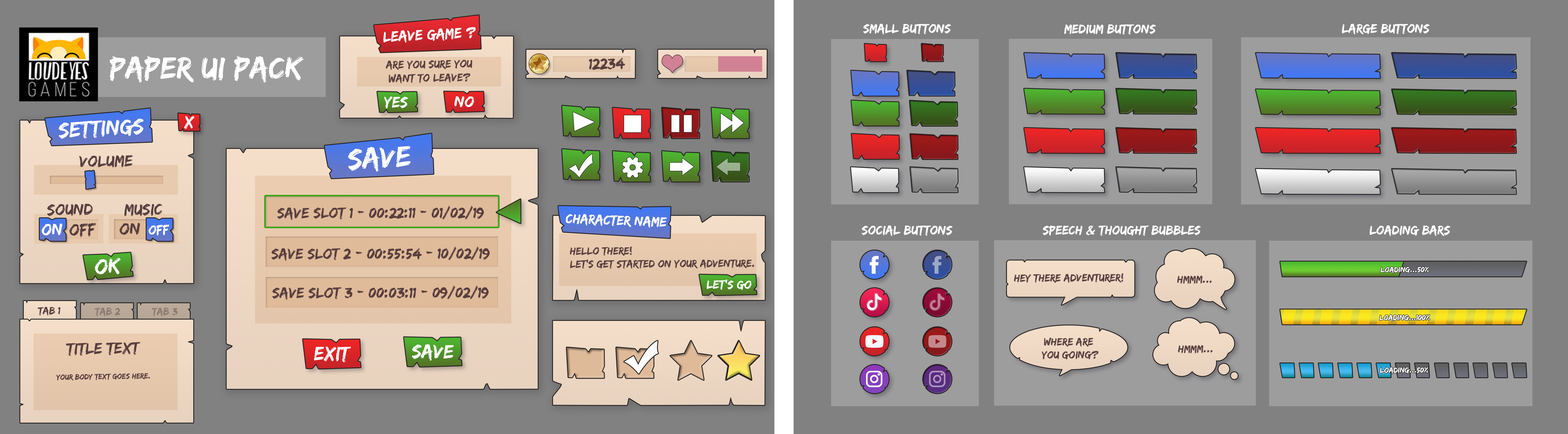
<style>
.page{position:relative;width:1568px;height:434px;background:#818181}
.page>*{position:absolute;margin:0}
.t1{font:15.2px "EdoSZ";color:#ffffff}
.t2{font:13.1px "EdoSZ";color:#ffffff}
.t3{font:32.1px "EdoSZ";color:#ffffff}
.t4{font:11.3px "EdoSZ";color:#583e3e}
.t5{font:15.7px "EdoSZ";color:#583e3e}
.t6{font:16px "EdoSZ";color:#ffffff}
.t7{font:22.4px "EdoSZ";color:#ffffff}
.t8{font:17.3px "EdoSZ";color:#ffffff}
.t9{font:30.4px "EdoSZ";color:#ffffff}
.t10{font:16.4px "EdoSZ";color:#583e3e}
.t11{font:15.4px "EdoSZ";color:#583e3e}
.t12{font:13.9px "EdoSZ";color:#ffffff}
.t13{font:17.1px "EdoSZ";color:#ffffff}
.t14{font:17.1px "EdoSZ";color:#583e3e}
.t15{font:13.5px "EdoSZ";color:#ffffff}
.t16{font:10.9px "EdoSZ";color:#583e3e}
.t17{font:7.9px "EdoSZ";color:#ffffff}
.t18{font:12.3px "EdoSZ";color:#ffffff}
.t19{font:10.5px "EdoSZ";color:#583e3e}
.t20{font:10.5px "EdoSZ";color:#8d7a70}
.t21{font:20.2px "EdoSZ";color:#ffffff}
.t22{font:7.9px "EdoSZ";color:#583e3e}
</style>
<div class="page">
<p class="t1" style="left:383px;top:27px;width:93px;height:16px;rotate:-3deg">Leave Game ?</p>
<p class="t2" style="left:863px;top:24px;width:88px;height:11px">Small Buttons</p>
<p class="t2" style="left:1064px;top:24px;width:92px;height:11px">Medium Buttons</p>
<p class="t2" style="left:1342px;top:24px;width:88px;height:11px">Large Buttons</p>
<p class="t3" style="left:110px;top:56px;width:194px;height:27px">Paper UI Pack</p>
<p class="t4" style="left:386px;top:60px;width:86px;height:24px;text-align:center;rotate:-1deg">Are You sure you<br>want to Leave?</p>
<p class="t5" style="left:589px;top:58px;width:36px;height:12px;rotate:-1deg">12234</p>
<p class="t6" style="left:384px;top:96px;width:24px;height:13px;rotate:1deg">Yes</p>
<p class="t6" style="left:454px;top:96px;width:20px;height:12px;rotate:1deg">No</p>
<p class="t7" style="left:58px;top:118px;width:86px;height:21px;rotate:-3deg">Settings</p>
<p class="t8" style="left:184px;top:116px;width:11px;height:13px;rotate:-3deg">x</p>
<p class="t9" style="left:348px;top:146px;width:63px;height:26px;rotate:-3deg">Save</p>
<p class="t10" style="left:79px;top:155px;width:54px;height:13px;rotate:-1deg">volume</p>
<p class="t10" style="left:47px;top:204px;width:46px;height:12px;rotate:-1deg">Sound</p>
<p class="t10" style="left:124px;top:204px;width:38px;height:12px;rotate:-1deg">Music</p>
<p class="t11" style="left:277px;top:206px;width:207px;height:14px">Save Slot 1 - 00:22:11 - 01/02/19</p>
<p class="t12" style="left:566px;top:214px;width:101px;height:14px;rotate:2deg">Character Name</p>
<p class="t13" style="left:41px;top:224px;width:21px;height:12px;rotate:-3deg">On</p>
<p class="t14" style="left:69px;top:223px;width:27px;height:14px;rotate:-3deg">Off</p>
<p class="t14" style="left:119px;top:223px;width:21px;height:12px;rotate:-3deg">ON</p>
<p class="t15" style="left:148px;top:225px;width:21px;height:11px;rotate:-3deg">Off</p>
<p class="t2" style="left:862px;top:225px;width:91px;height:11px">Social Buttons</p>
<p class="t2" style="left:1043px;top:225px;width:158px;height:11px">Speech &amp; Thought Bubbles</p>
<p class="t2" style="left:1369px;top:225px;width:81px;height:11px">Loading Bars</p>
<p class="t7" style="left:95px;top:258px;width:26px;height:17px;rotate:-3deg">ok</p>
<p class="t11" style="left:271px;top:246px;width:219px;height:15px">Save Slot 2 - 00:55:54 - 10/02/19</p>
<p class="t16" style="left:570px;top:246px;width:184px;height:23px">Hello There!<br>Let’s Get started on your adventure.</p>
<p class="t17" style="left:1381px;top:267px;width:48px;height:7px">Loading...50%</p>
<p class="t18" style="left:707px;top:279px;width:44px;height:11px;rotate:1deg">Let’s Go</p>
<p class="t16" style="left:1014px;top:273px;width:109px;height:10px">Hey There Adventurer!</p>
<p class="t16" style="left:1177px;top:276px;width:35px;height:8px">hmmm...</p>
<p class="t11" style="left:272px;top:286px;width:217px;height:14px">Save Slot 3 - 00:03:11 - 09/02/19</p>
<p class="t19" style="left:38px;top:307px;width:22px;height:9px;rotate:-1deg">Tab 1</p>
<p class="t20" style="left:94px;top:308px;width:26px;height:9px;rotate:-1deg">Tab 2</p>
<p class="t20" style="left:152px;top:308px;width:26px;height:9px;rotate:-1deg">Tab 3</p>
<p class="t17" style="left:1380px;top:315px;width:50px;height:7px">Loading...100%</p>
<p class="t16" style="left:1042px;top:338px;width:57px;height:22px;text-align:center">Where are <br>you going?</p>
<p class="t10" style="left:66px;top:342px;width:74px;height:14px;rotate:-1deg">Title Text</p>
<p class="t21" style="left:314px;top:347px;width:37px;height:16px;rotate:1deg">Exit</p>
<p class="t21" style="left:412px;top:344px;width:42px;height:17px;rotate:1deg">Save</p>
<p class="t16" style="left:1178px;top:345px;width:35px;height:9px">hmmm...</p>
<p class="t22" style="left:56px;top:373px;width:94px;height:8px;rotate:-1deg">Your body text goes here.</p>
<p class="t17" style="left:1380px;top:367px;width:48px;height:7px">Loading...50%</p>
</div>
